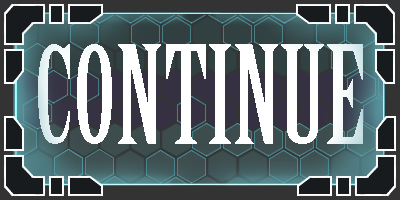
<style>
.page{position:relative;width:400px;height:200px}
.page>*{position:absolute;margin:0}
.t1{font:133.3px "BirchStd";color:#ffffff}
</style>
<div class="page">
<p class="t1" style="left:38px;top:44px;width:325px;height:100px">CONTINUE</p>
</div>
